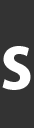
<style>
.page{position:relative;width:34px;height:128px;background:#333333}
.page>*{position:absolute;margin:0}
.t1{font:75px "AdobeGothicStd-Bold";color:#ffffff}
</style>
<div class="page">
<p class="t1" style="left:2px;top:46px;width:29px;height:44px">s</p>
</div>
